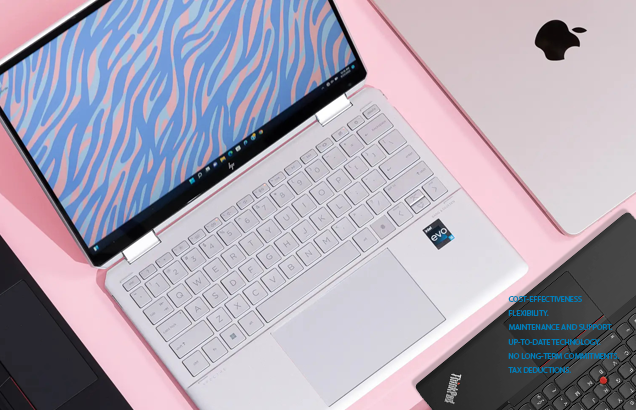
<style>
.page{position:relative;width:636px;height:410px}
.page>*{position:absolute;margin:0}
.t1{font:8.1px/27.6px "MyriadPro-Regular";color:#027db8;text-transform:uppercase}
</style>
<div class="page">
<p class="t1" style="left:508px;top:296px;width:111px;height:77px">Cost-effectiveness<br>Flexibility.<br>Maintenance and Support.<br>Up-to-date Technology.<br>No Long-term Commitments.<br>Tax Deductions.</p>
</div>
